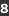
<style>
.page{position:relative;width:9px;height:16px;background:#333333}
.page>*{position:absolute;margin:0}
.t1{font:12.5px "RoundedMplus1c-ExtraBold";color:#ffffff}
</style>
<div class="page">
<p class="t1" style="left:0px;top:3px;width:9px;height:11px">8</p>
</div>
